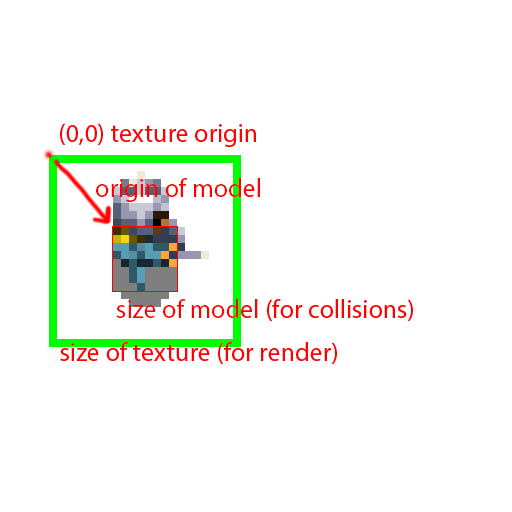
<style>
.page{position:relative;width:512px;height:512px;background:#ffffff}
.page>*{position:absolute;margin:0}
.t1{font:26px "MyriadPro-Regular";color:#ff0000}
</style>
<div class="page">
<p class="t1" style="left:60px;top:123px;width:196px;height:24px">(0,0) texture origin</p>
<p class="t1" style="left:96px;top:178px;width:164px;height:24px">origin of model</p>
<p class="t1" style="left:116px;top:299px;width:297px;height:22px">size of model (for collisions)</p>
<p class="t1" style="left:60px;top:342px;width:277px;height:22px">size of texture (for render)</p>
</div>
